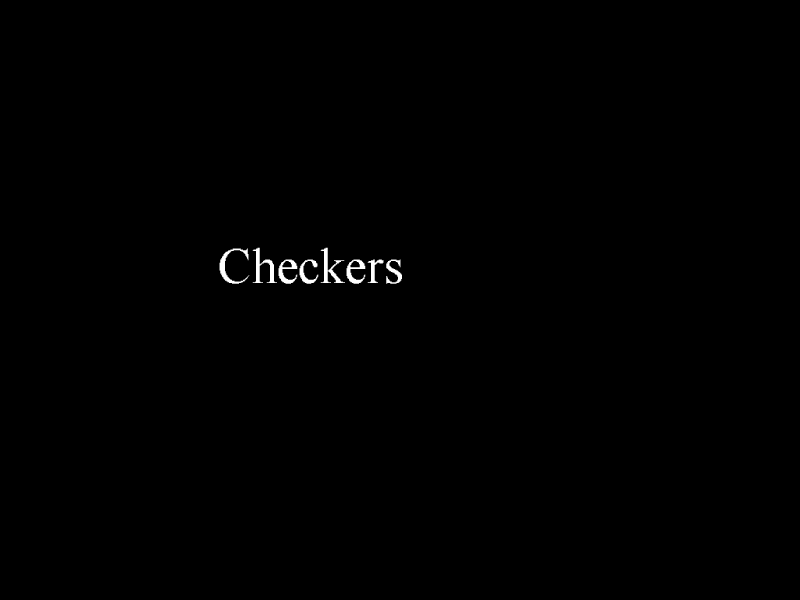
<style>
.page{position:relative;width:800px;height:600px;background:#000000}
.page>*{position:absolute;margin:0}
.t1{font:50px "Pixelite";color:#ffffff}
</style>
<div class="page">
<p class="t1" style="left:219px;top:247px;width:183px;height:37px">Checkers</p>
</div>
